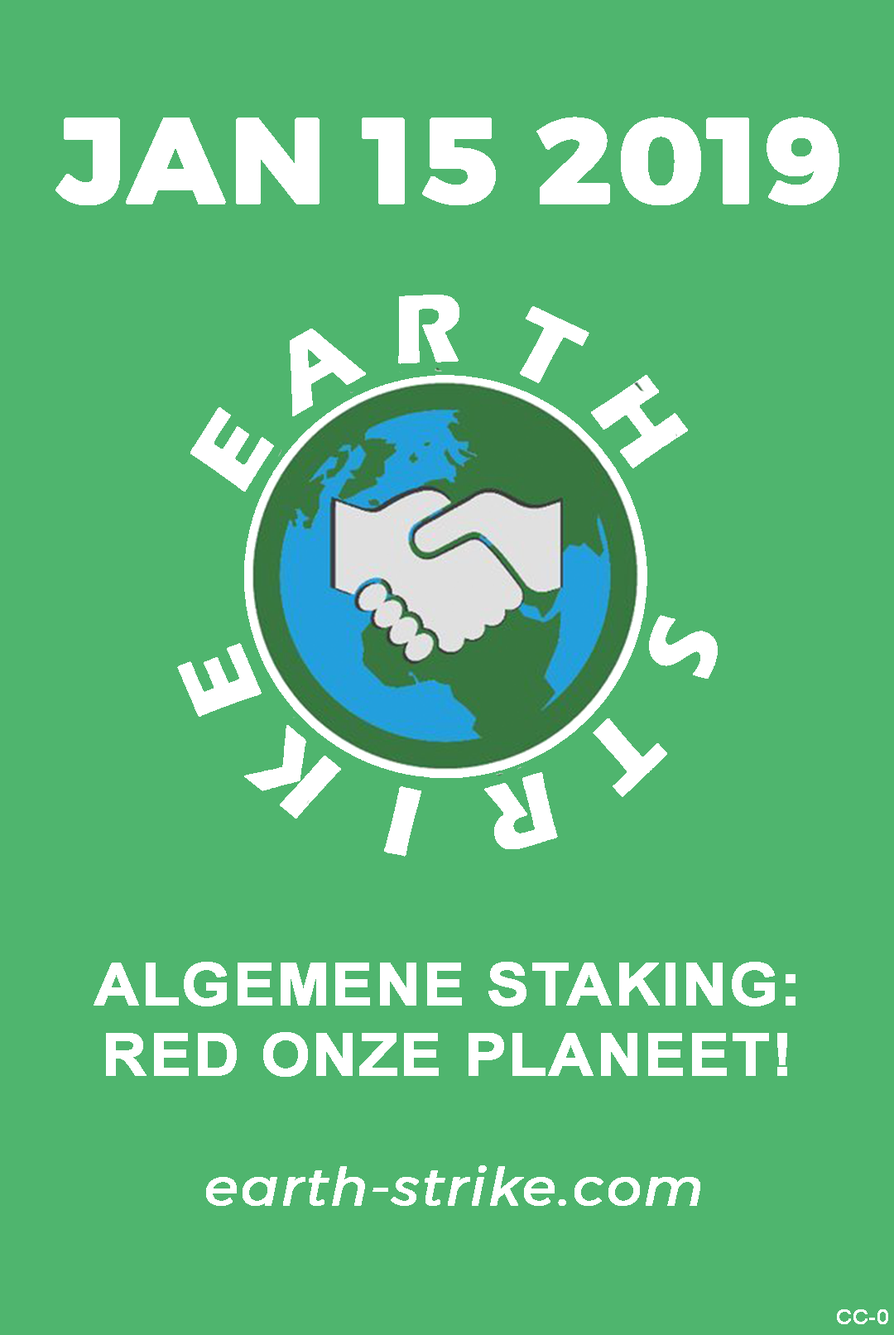
<style>
.page{position:relative;width:894px;height:1335px;background:#4fb56e}
.page>*{position:absolute;margin:0}
.t1{font:117.5px "Montserrat-Bold";letter-spacing:0.02em;color:#ffffff;font-weight:bold;scale:1.05 1}
.t2{font:58.7px "Arial-BoldMT";letter-spacing:0.02em;color:#ffffff;font-weight:bold;scale:1.05 1}
.t3{font:53px "Montserrat-Italic";letter-spacing:0.02em;color:#ffffff;font-weight:bold;scale:1.05 1}
.t4{font:19.9px "ArialMT";letter-spacing:0.02em;color:#ffffff;font-weight:bold;scale:1.05 1}
</style>
<div class="page">
<p class="t1" style="left:55px;top:117px;width:784px;height:88px">JAN 15 2019</p>
<p class="t2" style="left:93px;top:961px;width:702px;height:115px;text-align:center">ALGEMENE STAKING:<br>RED ONZE PLANEET!</p>
<p class="t3" style="left:206px;top:1165px;width:494px;height:40px">earth-strike.com</p>
<p class="t4" style="left:836px;top:1309px;width:52px;height:15px">CC-0</p>
</div>
